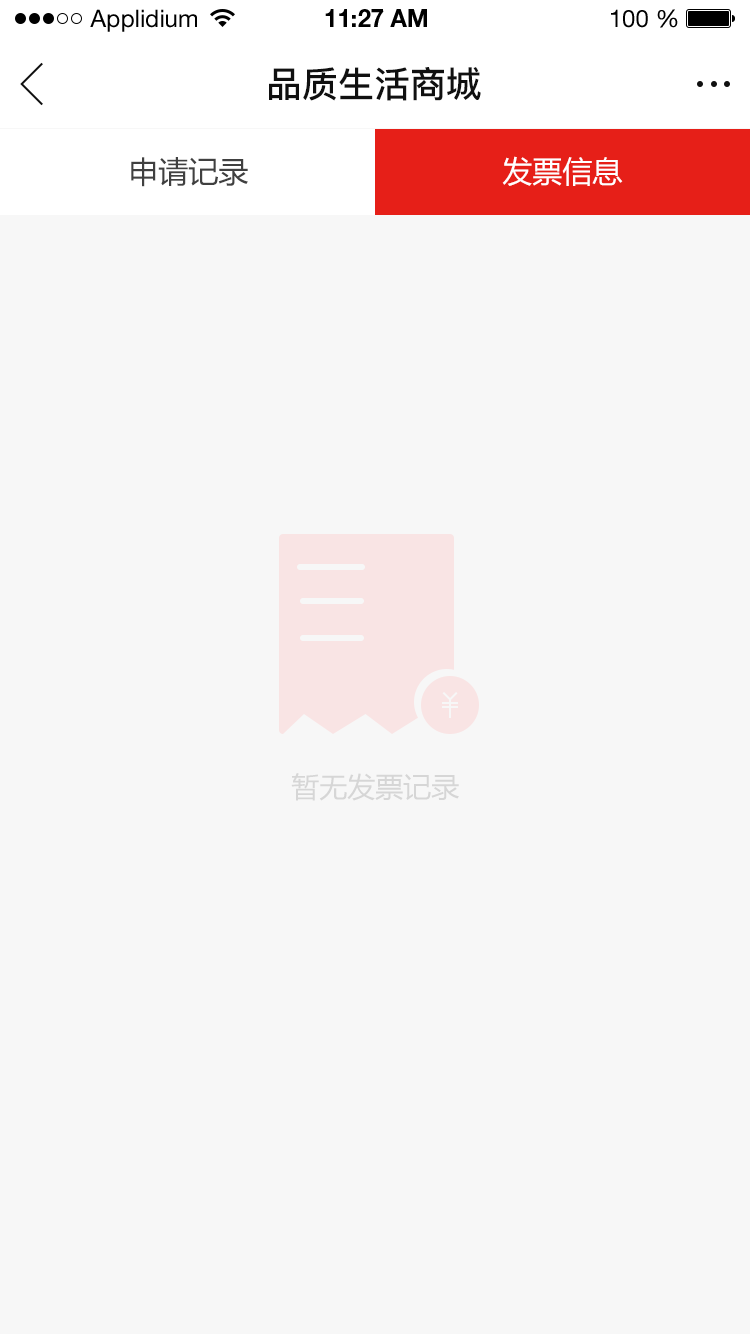
<style>
.page{position:relative;width:750px;height:1334px;background:#f7f7f7}
.page>*{position:absolute;margin:0}
.t1{font:24px "HelveticaNeueLTStd-Roman";color:#000000}
.t2{font:24px "HelveticaNeueLTStd-Bd";color:#000000}
.t3{font:36px "PingFang-SC-Bold";color:#101010;text-transform:uppercase}
.t4{font:30px "MicrosoftYaHei";color:#404040;text-transform:uppercase}
.t5{font:30px "MicrosoftYaHei";color:#ffffff;text-transform:uppercase}
.t6{font:28px "MicrosoftYaHei";color:#d6d6d6;text-transform:uppercase}
</style>
<div class="page">
<p class="t1" style="left:90px;top:9px;width:107px;height:23px">Applidium</p>
<p class="t2" style="left:325px;top:9px;width:102px;height:18px">11:27 AM</p>
<p class="t1" style="left:611px;top:9px;width:67px;height:19px">100 %</p>
<p class="t3" style="left:269px;top:67px;width:212px;height:34px">品质生活商城</p>
<p class="t4" style="left:131px;top:157px;width:117px;height:30px">申请记录</p>
<p class="t5" style="left:502px;top:156px;width:121px;height:30px">发票信息</p>
<p class="t6" style="left:291px;top:773px;width:168px;height:28px">暂无发票记录</p>
</div>
